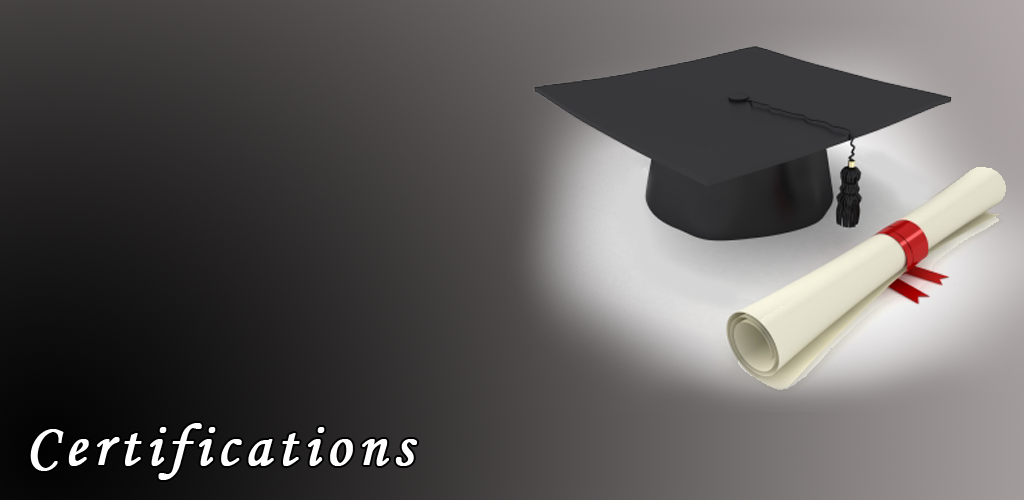
<style>
.page{position:relative;width:1024px;height:500px}
.page>*{position:absolute;margin:0}
.t1{font:60px "MonotypeCorsiva";letter-spacing:0.1em;color:#ffffff;font-weight:bold}
</style>
<div class="page">
<p class="t1" style="left:30px;top:423px;width:387px;height:57px">Certifications</p>
</div>
